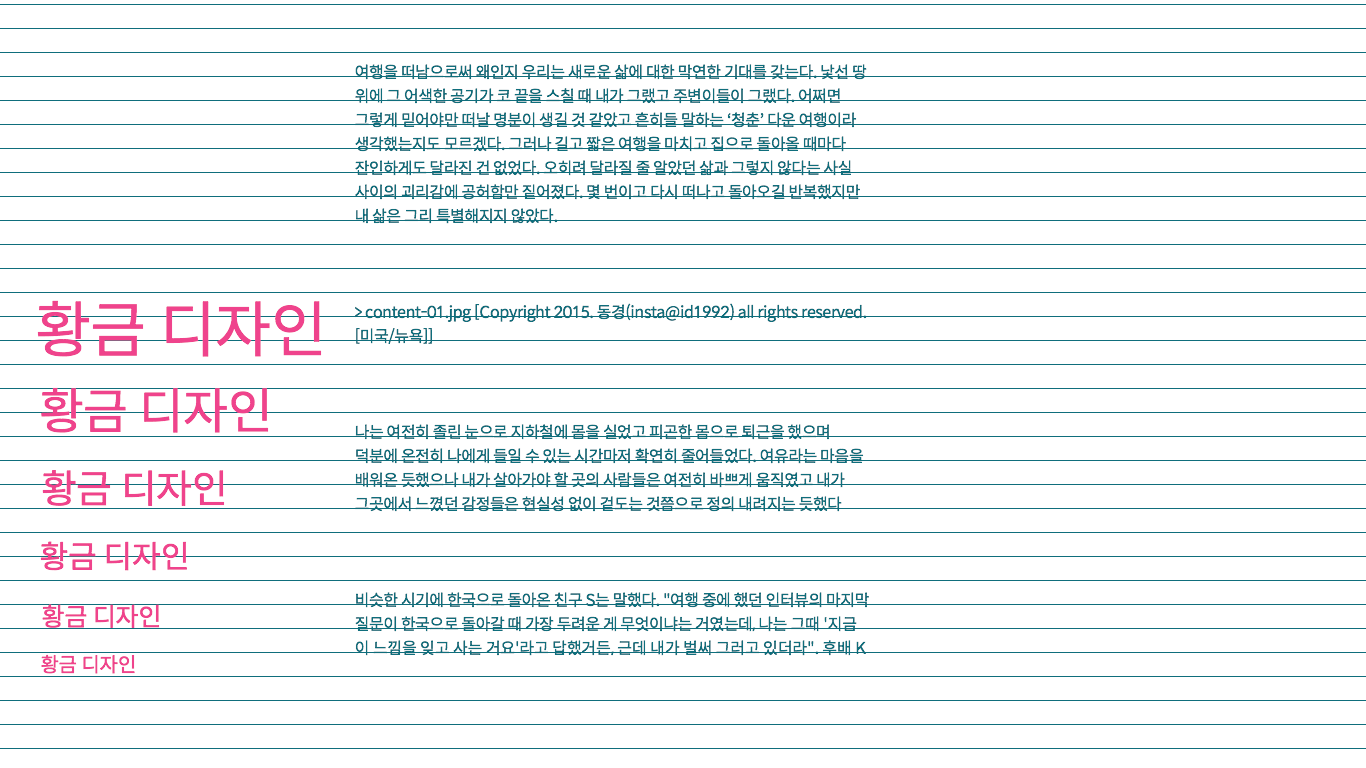
<style>
.page{position:relative;width:1366px;height:768px;background:#ffffff}
.page>*{position:absolute;margin:0}
.t1{font:16px "SpoqaHanSans-Regular";letter-spacing:-0.005em;color:#0f6e7c}
.t2{font:16px "SpoqaHanSans-Regular";letter-spacing:-0.025em;color:#0f6e7c}
.t3{font:61px "SpoqaHanSans-Regular";letter-spacing:-0.005em;color:#ef438c}
.t4{font:48.8px "SpoqaHanSans-Regular";letter-spacing:-0.005em;color:#ef438c}
.t5{font:39.1px "SpoqaHanSans-Regular";letter-spacing:-0.005em;color:#ef438c}
.t6{font:31.2px "SpoqaHanSans-Regular";letter-spacing:-0.005em;color:#ef438c}
.t7{font:25px "SpoqaHanSans-Regular";letter-spacing:-0.005em;color:#ef438c}
.t8{font:20px "SpoqaHanSans-Regular";letter-spacing:-0.005em;color:#ef438c}
</style>
<div class="page">
<p class="t1" style="left:355px;top:64px;width:514px;height:592px"><span class="t2">여행을 떠남으로써 왜인지 우리는 새로운 삶에 대한 막연한 기대를 갖는다. 낯선 땅 위에 그 어색한 공기가 코 끝을 스칠 때 내가 그랬고 주변이들이 그랬다. 어쩌면 그렇게 믿어야만 떠날 명분이 생길 것 같았고 흔히들 말하는 ‘청춘’ 다운 여행이라 생각했는지도 모르겠다. 그러나 길고 짧은 여행을 마치고 집으로 돌아올 때마다 잔인하게도 달라진 건 없었다. 오히려 달라질 줄 알았던 삶과 그렇지 않다는 사실 사이의 괴리감에 공허함만 짙어졌다. 몇 번이고 다시 떠나고 돌아오길 반복했지만 내 삶은 그리 특별해지지 않았다.<br><br>&gt; content-01.jpg [Copyright 2015. 동경(insta@id1992) all rights reserved. [미국/뉴욕]]<br><br>나는 여전히 졸린 눈으로 지하철에 몸을 실었고 피곤한 몸으로 퇴근을 했으며 덕분에 온전히 나에게 들일 수 있는 시간마저 확연히 줄어들었다. 여유라는 마음을 배워온 듯했으나 내가 살아가야 할 곳의 사람들은 여전히 바쁘게 움직였고 내가 그곳에서 느꼈던 감정들은 현실성 없이 겉도는 것쯤으로 정의 내려지는 듯했다<br><br>비슷한 시기에 한국으로 돌아온 친구 S는 말했다. "여행 중에 했던 인터뷰의 마지막 질문이 한국으로 돌아갈 때 가장 두려운 게 무엇이냐는 거였는데, 나는</span> 그때 '지금 이 느낌을 잊고 사는 거요'라고 답했거든, 근데 내가 벌써 그러고 있더라". 후배 K 역시 비슷한 이유로 탄식했다.<br><br>대부분의 여행자들이 긴 여행을 마치고 돌아왔을 때 가장 두려워하는 것은 예상컨대 돌아올 자리가 없는 것도 아니고, 남들보다 뒤처지는 것도 아니고 그저 내가 보고 듣고 느꼈던 것들이 점차 사회가 만든 ‘현실’이라는 벽에 부딪쳐 사라지는 것일지도 모른다. 아, 어쩌면 여행 후에 달라진 것이 없다며 홀로 괴로워하는 것 역시 '현실'이 내뱉는 추긍에 지나온 시간들을 합리화할 수 없을지 모른다는 불안함에서 오는 두려움은 아니었을까.<br><br>&gt; content-02.jpg [Copyright 2015. 동경(insta@id1992) all rights reserved. [미국/뉴욕]]<br><br>현실. 그러고 보면 여행지에서 만난 대부분의 사람들은 ‘현실’이라는 말을 쓰지 않았다. 그러나 그들은 어딘가에서 ‘현실’에서 벗어난 사람들로 인식되고 있는 듯했다. 먹고 싶은 거 먹고 쉬고 싶은 만큼 쉬는 것. 살아 숨 쉬는 내가 값을 주고 행하는 모든 것이 어찌 비현실이 될 수 있는지. 혹시 그 누군가 이 모든 걸 비현실로 정의 내렸기 때문에 현실과의 이해관계에서 숱한 장애물이 생겨나 결국 잊어가야만 살아가기 편하게끔 만들어 버린 건 아닐는지.<br><br>왜인지 나는 이제 그간 어땠느냐는 안부에 그저 지난 공백에 비례하는 무언가를 바라는 벽 앞에 무너지지 않으려 노력하고 있다는 대답 밖에는 할 말이 없을 것 같다.</p>
<p class="t3" style="left:37px;top:300px;width:285px;height:57px">황금 디자인</p>
<p class="t4" style="left:41px;top:387px;width:228px;height:46px">황금 디자인</p>
<p class="t5" style="left:42px;top:470px;width:183px;height:36px">황금 디자인</p>
<p class="t6" style="left:40px;top:541px;width:147px;height:30px">황금 디자인</p>
<p class="t7" style="left:42px;top:604px;width:118px;height:24px">황금 디자인</p>
<p class="t8" style="left:41px;top:654px;width:94px;height:20px">황금 디자인</p>
</div>
